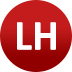
<style>
.page{position:relative;width:72px;height:72px;background:#ffffff}
.page>*{position:absolute;margin:0}
.t1{font:43.6px "Calibri-Bold";color:#ffffff}
</style>
<div class="page">
<p class="t1" style="left:17px;top:22px;width:39px;height:28px">LH</p>
</div>
